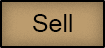
<style>
.page{position:relative;width:105px;height:48px}
.page>*{position:absolute;margin:0}
.t1{font:25px "ArialMT";color:#000000}
</style>
<div class="page">
<p class="t1" style="left:33px;top:14px;width:39px;height:18px">Sell</p>
</div>
